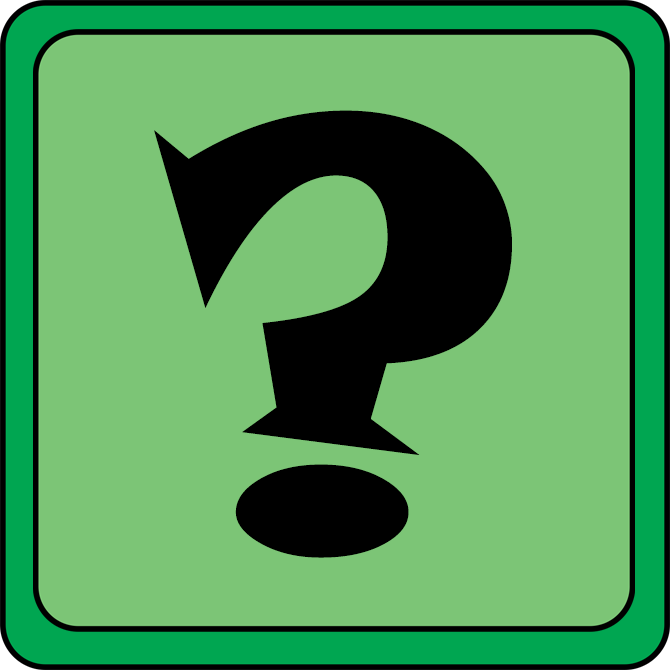
<style>
.page{position:relative;width:670px;height:670px;background:#7cc576}
.page>*{position:absolute;margin:0}
.t1{font:600.1px "SnapITC-Regular";color:#000000;scale:0.75 1}
</style>
<div class="page">
<p class="t1" style="left:154px;top:110px;width:358px;height:448px">?</p>
</div>
